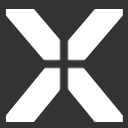
<style>
.page{position:relative;width:128px;height:128px;background:#333333}
.page>*{position:absolute;margin:0}
.t1{font:195px "Orbitron-Bold";color:#ffffff}
</style>
<div class="page">
<p class="t1" style="left:5px;top:9px;width:118px;height:113px">x</p>
</div>
